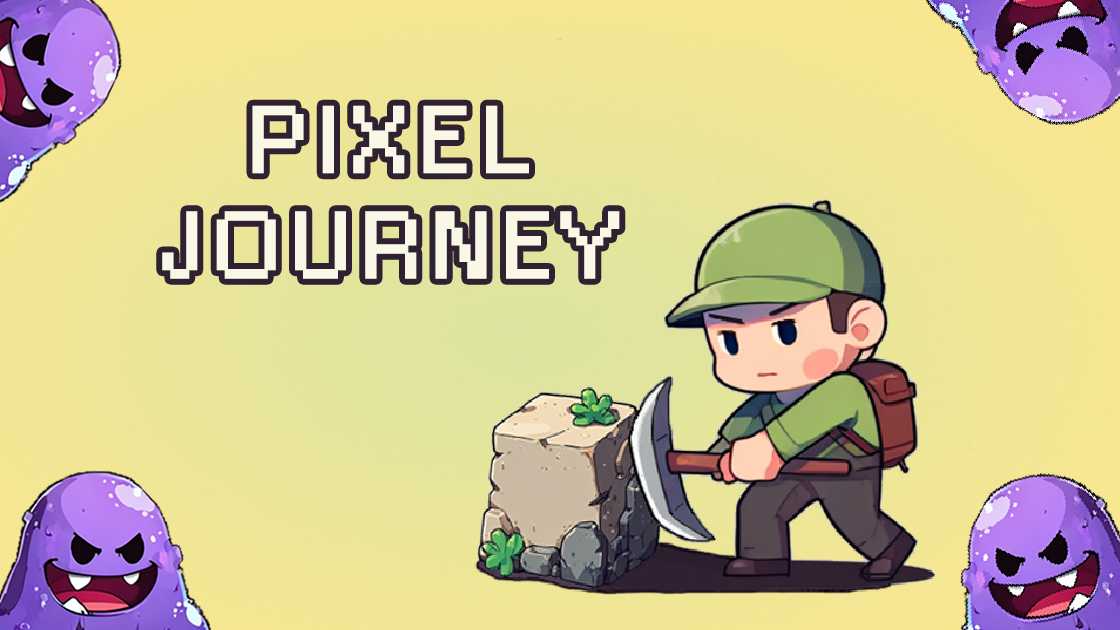
<style>
.page{position:relative;width:1120px;height:630px}
.page>*{position:absolute;margin:0}
.t1{font:88px "Small Fonts";letter-spacing:0.14em;color:#f9f8e7;font-weight:bold;scale:1.16 1}
</style>
<div class="page">
<p class="t1" style="left:162px;top:105px;width:458px;height:174px;text-align:center">PIXEL <br>JOURNEY</p>
</div>
